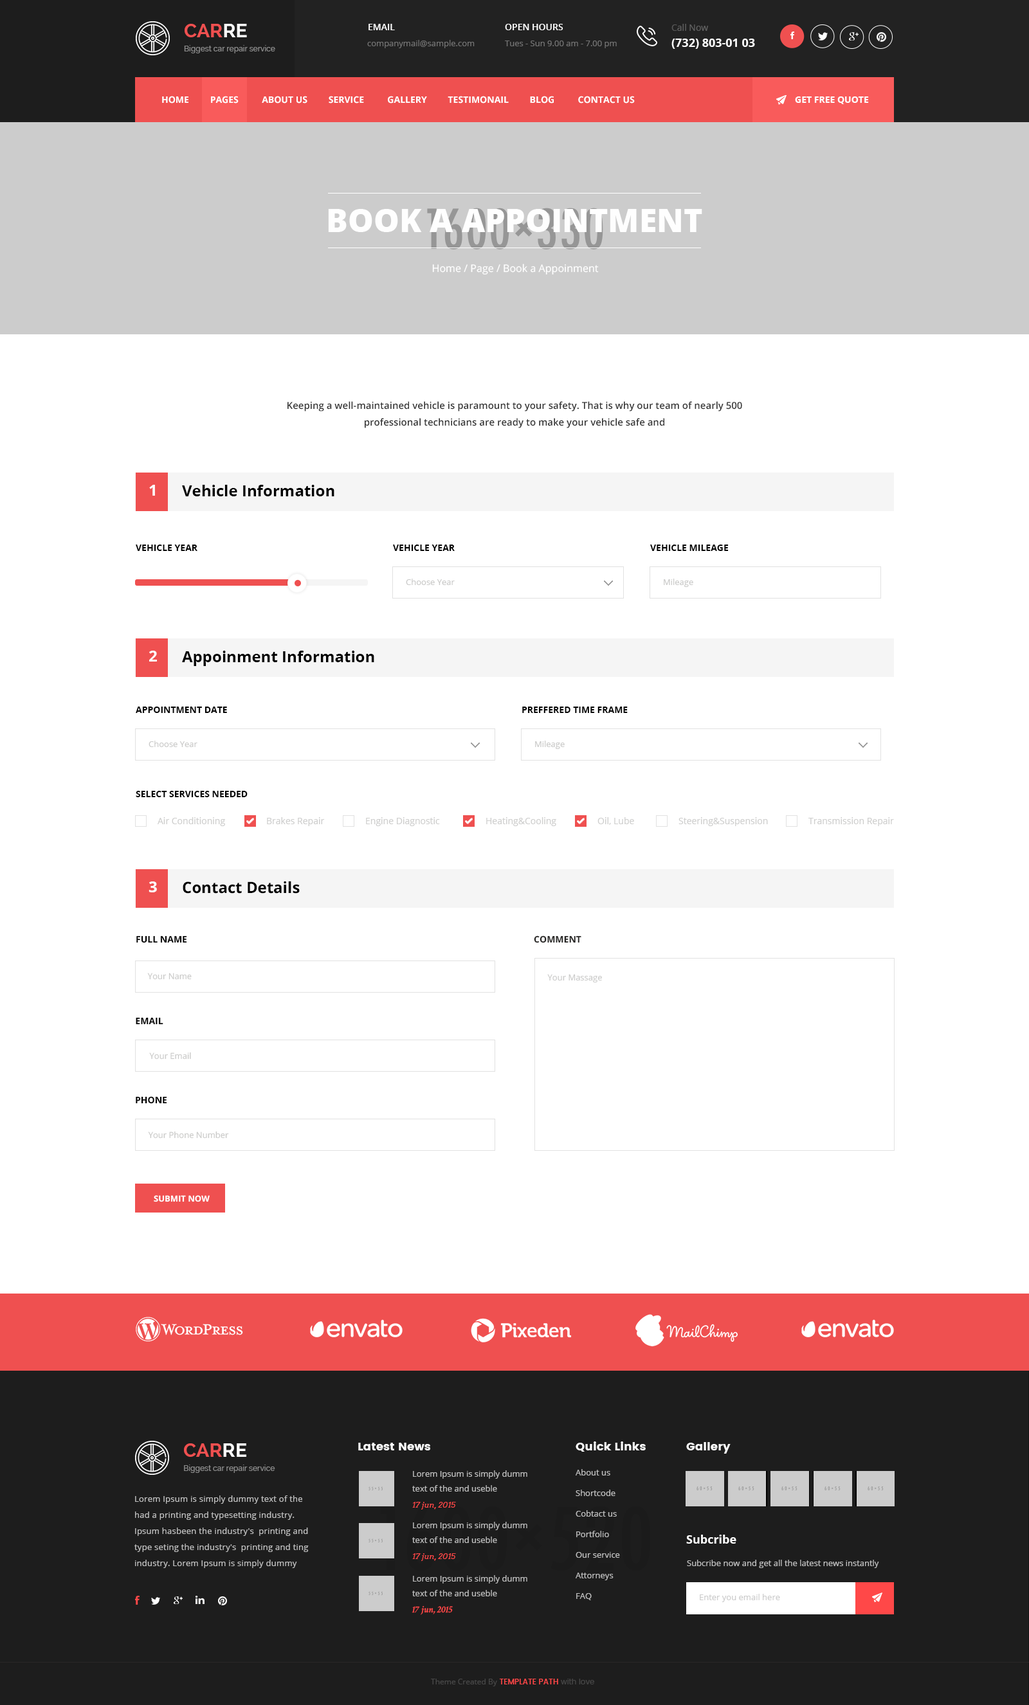
<style>
.page{position:relative;width:1029px;height:1705px;background:#ffffff}
.page>*{position:absolute;margin:0}
.t1{font:7.7px/14.1px "Raleway-Medium";color:#8a8a8a}
.t2{font:19.3px/14.1px "Raleway-Bold";color:#ef5050}
.t3{font:19.3px/14.1px "Raleway-Bold";color:#ffffff}
.t4{font:9px "OpenSans-Semibold";color:#ffffff}
.t5{font:11.6px/16.1px "OpenSans-Bold";color:#ffffff}
.t6{font:9px/16.1px "OpenSans";color:#575757}
.t7{font:9px/16.1px "OpenSans";color:#616161}
.t8{font:8.4px "OpenSans";color:#727272}
.t9{font:8.4px/14.1px "OpenSans";color:#727272}
.t10{font:8.4px/14.1px "Lato-Regular";color:#727272}
.t11{font:9px "OpenSans-Bold";color:#ffffff;text-transform:uppercase}
.t12{font:9px "OpenSans-Bold";color:#fefefe}
.t13{font:32.1px "OpenSans-Extrabold";color:#fefefe;text-transform:uppercase}
.t14{font:10.3px "OpenSans";color:#fefefe}
.t15{font:9.7px/16.7px "OpenSans-Semibold";color:#333333}
.t16{font:15.4px "OpenSans-Bold";color:#ffffff}
.t17{font:15.4px "OpenSans-Bold";color:#000000}
.t18{font:9px "OpenSans-Bold";color:#000000;text-transform:uppercase}
.t19{font:8.4px "OpenSans";color:#cacac9}
.t20{font:9px "OpenSans";color:#cececd}
.t21{font:9px "OpenSans-Bold";color:#262524;text-transform:uppercase}
.t22{font:8.4px "OpenSans-Bold";color:#ffffff;text-transform:uppercase}
.t23{font:11.6px "Poppins";color:#ffffff}
.t24{font:8.4px/20.6px "OpenSans";color:#bebebe}
.t25{font:8.4px/14.8px "OpenSans";color:#bebebe}
.t26{font:7.7px/16.1px "Arvo-Italic";color:#ff4848}
.t27{font:8.4px/16.1px "OpenSans";letter-spacing:0.02em;color:#bebebe}
.t28{font:11.6px "OpenSans-Bold";color:#ffffff}
.t29{font:8.4px "OpenSans";color:#bebebe}
.t30{font:9.6px/16.1px "CrimsonText-SemiboldItalic";color:#ff4848}
.t31{font:8.4px "OpenSans";color:#cccccc}
.t32{font:7.7px "OpenSans";color:#474747}
.t33{font:7.7px "Poppins-Medium";color:#ff4848}
.t34{font:7.7px "Poppins-Regular";color:#474747}
</style>
<div class="page">
<p class="t1" style="left:184px;top:24px;width:91px;height:29px"><span class="t2">CAR</span><span class="t3">RE<br></span>Biggest car repair service</p>
<p class="t4" style="left:368px;top:24px;width:27px;height:6px">EMAIL</p>
<p class="t4" style="left:505px;top:24px;width:58px;height:6px">OPEN HOURS</p>
<p class="t5" style="left:671px;top:24px;width:84px;height:25px"><span class="t6">C</span><span class="t7">all Now<br></span>(732) 803-01 03</p>
<p class="t8" style="left:367px;top:40px;width:107px;height:8px">companymail@sample.com</p>
<p class="t9" style="left:505px;top:40px;width:111px;height:8px">Tues - Sun 9.00 am - 7.00 pm<br><span class="t10">Saturday &amp; Monday Closed</span></p>
<p class="t11" style="left:162px;top:96px;width:472px;height:8px">HOME         PAGES          ABOUT US         SERVICE          Gallery         TESTIMONAIL         BLOG          CONTACT US</p>
<p class="t12" style="left:795px;top:96px;width:74px;height:8px">GET FREE QUOTE</p>
<p class="t13" style="left:328px;top:209px;width:374px;height:23px">BOOK A APPOINTMENT</p>
<p class="t14" style="left:432px;top:264px;width:166px;height:10px">Home / Page / Book a Appoinment</p>
<p class="t15" style="left:287px;top:401px;width:455px;height:27px;text-align:center">Keeping a well-maintained vehicle is paramount to your safety. That is why our team of nearly 500 professional technicians are ready to make your vehicle safe and</p>
<p class="t16" style="left:149px;top:485px;width:6px;height:11px">1</p>
<p class="t17" style="left:182px;top:485px;width:152px;height:11px">Vehicle Information</p>
<p class="t18" style="left:136px;top:544px;width:61px;height:7px">Vehicle Year</p>
<p class="t18" style="left:393px;top:544px;width:62px;height:7px">Vehicle Year</p>
<p class="t18" style="left:650px;top:544px;width:78px;height:7px">VEHICLE MILEAGE</p>
<p class="t19" style="left:406px;top:579px;width:49px;height:6px">Choose Year</p>
<p class="t19" style="left:663px;top:579px;width:30px;height:8px">Mileage</p>
<p class="t16" style="left:149px;top:651px;width:8px;height:11px">2</p>
<p class="t17" style="left:182px;top:651px;width:192px;height:15px">Appoinment Information</p>
<p class="t18" style="left:136px;top:706px;width:91px;height:7px">APPOINTMENT DATE</p>
<p class="t18" style="left:522px;top:706px;width:105px;height:7px">PREFFERED TIME FRAME</p>
<p class="t19" style="left:148px;top:741px;width:49px;height:6px">Choose Year</p>
<p class="t19" style="left:535px;top:741px;width:29px;height:8px">Mileage</p>
<p class="t18" style="left:136px;top:791px;width:112px;height:6px">SELECT SERVICES NEEDED</p>
<p class="t20" style="left:158px;top:817px;width:67px;height:9px">Air Conditioning</p>
<p class="t20" style="left:267px;top:817px;width:58px;height:9px">Brakes Repair</p>
<p class="t20" style="left:366px;top:817px;width:74px;height:9px">Engine Diagnostic</p>
<p class="t20" style="left:486px;top:817px;width:70px;height:9px">Heating&amp;Cooling</p>
<p class="t20" style="left:597px;top:817px;width:37px;height:8px">Oil, Lube</p>
<p class="t20" style="left:678px;top:817px;width:90px;height:9px">Steering&amp;Suspension</p>
<p class="t20" style="left:808px;top:817px;width:86px;height:9px">Transmission Repair</p>
<p class="t16" style="left:148px;top:881px;width:9px;height:11px">3</p>
<p class="t17" style="left:183px;top:881px;width:117px;height:13px">Contact Details</p>
<p class="t18" style="left:136px;top:935px;width:51px;height:8px">Full Name</p>
<p class="t21" style="left:534px;top:935px;width:47px;height:8px">Comment</p>
<p class="t19" style="left:147px;top:973px;width:45px;height:7px">Your Name</p>
<p class="t19" style="left:547px;top:974px;width:55px;height:9px">Your Massage</p>
<p class="t18" style="left:136px;top:1017px;width:27px;height:8px">Email</p>
<p class="t19" style="left:149px;top:1052px;width:42px;height:7px">Your Email</p>
<p class="t18" style="left:136px;top:1096px;width:31px;height:8px">Phone</p>
<p class="t19" style="left:148px;top:1131px;width:81px;height:7px">Your Phone Number</p>
<p class="t22" style="left:154px;top:1195px;width:56px;height:7px">Submit now</p>
<p class="t1" style="left:184px;top:1443px;width:91px;height:30px"><span class="t2">CAR</span><span class="t3">RE<br></span>Biggest car repair service</p>
<p class="t23" style="left:358px;top:1443px;width:72px;height:7px">Latest News</p>
<p class="t23" style="left:575px;top:1441px;width:70px;height:11px">Quick Links</p>
<p class="t23" style="left:686px;top:1442px;width:44px;height:12px">Gallery</p>
<p class="t24" style="left:575px;top:1469px;width:45px;height:131px">About us<br>Shortcode<br>Cobtact us<br>Portfolio<br>Our service<br>Attorneys<br>FAQ</p>
<p class="t25" style="left:412px;top:1470px;width:115px;height:39px">Lorem Ipsum is simply dumm<br>text of the and useble<br><span class="t26">17 jun, 2015</span></p>
<p class="t27" style="left:134px;top:1495px;width:175px;height:73px">Lorem Ipsum is simply dummy text of the had a printing and typesetting industry. <br>Ipsum hasbeen the industry's  printing and type seting the industry's  printing and ting industry. Lorem Ipsum is simply dummy</p>
<p class="t25" style="left:412px;top:1522px;width:115px;height:39px">Lorem Ipsum is simply dumm<br>text of the and useble<br><span class="t26">17 jun, 2015</span></p>
<p class="t28" style="left:686px;top:1534px;width:50px;height:10px">Subcribe</p>
<p class="t29" style="left:687px;top:1560px;width:192px;height:8px">Subcribe now and get all the latest news instantly</p>
<p class="t25" style="left:411px;top:1575px;width:116px;height:40px">Lorem Ipsum is simply dumm<br>text of the and useble<br><span class="t30">17 jun, 2015</span></p>
<p class="t31" style="left:699px;top:1594px;width:81px;height:8px">Enter you email here</p>
<p class="t32" style="left:431px;top:1679px;width:163px;height:7px">Theme Created By <span class="t33">TEMPLATE PATH </span><span class="t34">with love</span></p>
</div>
